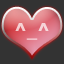
<style>
.page{position:relative;width:64px;height:64px;background:#333333}
.page>*{position:absolute;margin:0}
.t1{font:20px "HelveticaNeueLTCom-Bd";color:#f5d3d6;font-weight:bold}
</style>
<div class="page">
<p class="t1" style="left:15px;top:23px;width:34px;height:17px">^_^</p>
</div>
